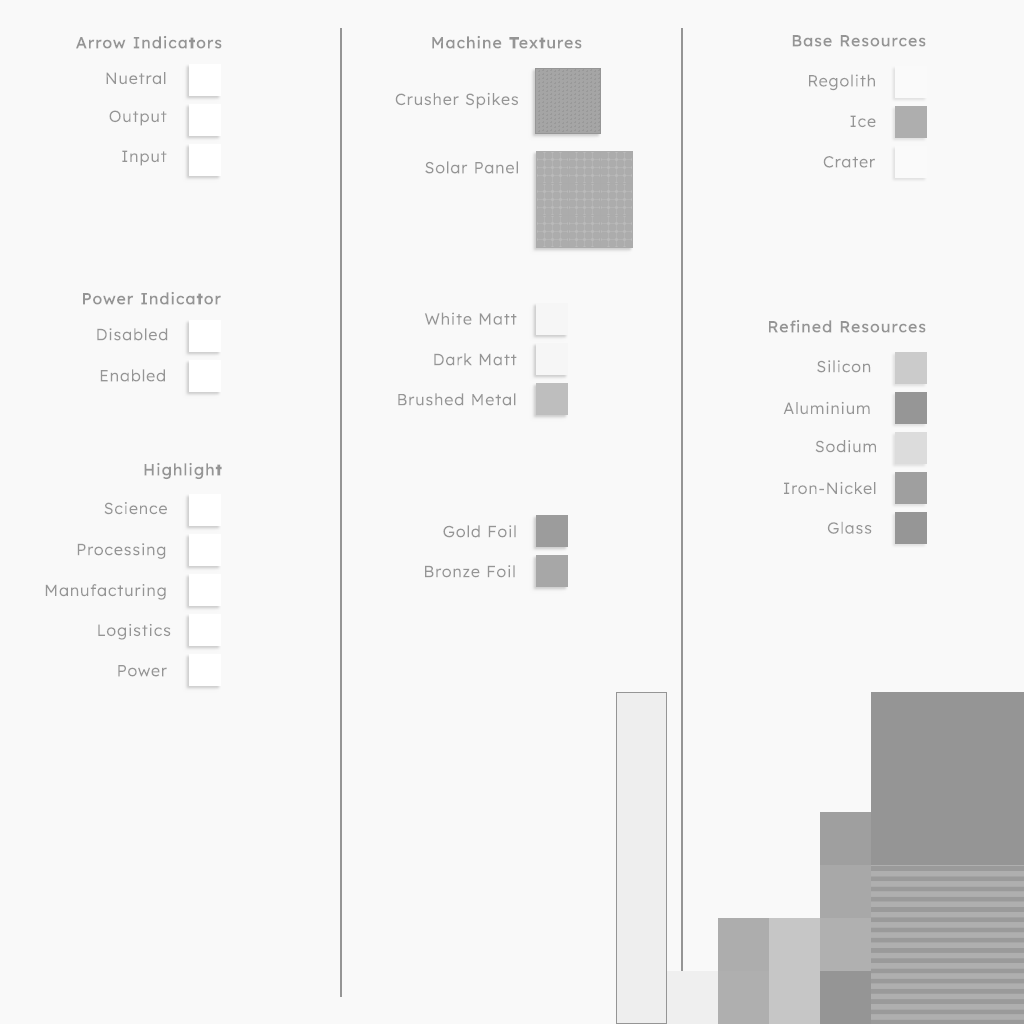
<style>
.page{position:relative;width:1024px;height:1024px;background:#f9f9f9}
.page>*{position:absolute;margin:0}
.t1{font:16px "Lexend-Bold";letter-spacing:0.06em;color:#959595}
.t2{font:16px "Lexend-Light";letter-spacing:0.06em;color:#959595}
</style>
<div class="page">
<p class="t1" style="left:76px;top:35px;width:146px;height:14px">Arrow Indicators</p>
<p class="t1" style="left:432px;top:35px;width:150px;height:14px">Machine Textures</p>
<p class="t1" style="left:792px;top:35px;width:134px;height:12px">Base Resources</p>
<p class="t2" style="left:106px;top:72px;width:60px;height:13px">Nuetral</p>
<p class="t2" style="left:809px;top:74px;width:66px;height:17px">Regolith</p>
<p class="t2" style="left:395px;top:92px;width:123px;height:17px">Crusher Spikes</p>
<p class="t2" style="left:109px;top:110px;width:58px;height:16px">Output</p>
<p class="t2" style="left:850px;top:115px;width:26px;height:13px">Ice</p>
<p class="t2" style="left:122px;top:150px;width:45px;height:16px">Input</p>
<p class="t2" style="left:425px;top:161px;width:93px;height:13px">Solar Panel</p>
<p class="t2" style="left:823px;top:156px;width:52px;height:12px">Crater</p>
<p class="t1" style="left:83px;top:291px;width:138px;height:14px">Power Indicator</p>
<p class="t2" style="left:424px;top:312px;width:93px;height:13px">White Matt</p>
<p class="t2" style="left:97px;top:328px;width:71px;height:13px">Disabled</p>
<p class="t1" style="left:769px;top:319px;width:157px;height:14px">Refined Resources</p>
<p class="t2" style="left:434px;top:353px;width:83px;height:13px">Dark Matt</p>
<p class="t2" style="left:817px;top:360px;width:54px;height:13px">Silicon</p>
<p class="t2" style="left:100px;top:369px;width:65px;height:13px">Enabled</p>
<p class="t2" style="left:398px;top:393px;width:118px;height:13px">Brushed Metal</p>
<p class="t2" style="left:783px;top:401px;width:87px;height:14px">Aluminium</p>
<p class="t2" style="left:815px;top:440px;width:61px;height:13px">Sodium</p>
<p class="t1" style="left:144px;top:462px;width:78px;height:18px">Highlight</p>
<p class="t2" style="left:784px;top:481px;width:92px;height:14px">Iron-Nickel</p>
<p class="t2" style="left:104px;top:502px;width:63px;height:13px">Science</p>
<p class="t2" style="left:827px;top:521px;width:45px;height:13px">Glass</p>
<p class="t2" style="left:443px;top:525px;width:73px;height:13px">Gold Foil</p>
<p class="t2" style="left:77px;top:543px;width:89px;height:16px">Processing</p>
<p class="t2" style="left:425px;top:565px;width:90px;height:13px">Bronze Foil</p>
<p class="t2" style="left:45px;top:584px;width:121px;height:16px">Manufacturing</p>
<p class="t2" style="left:98px;top:623px;width:73px;height:17px">Logistics</p>
<p class="t2" style="left:118px;top:665px;width:49px;height:12px">Power</p>
</div>
